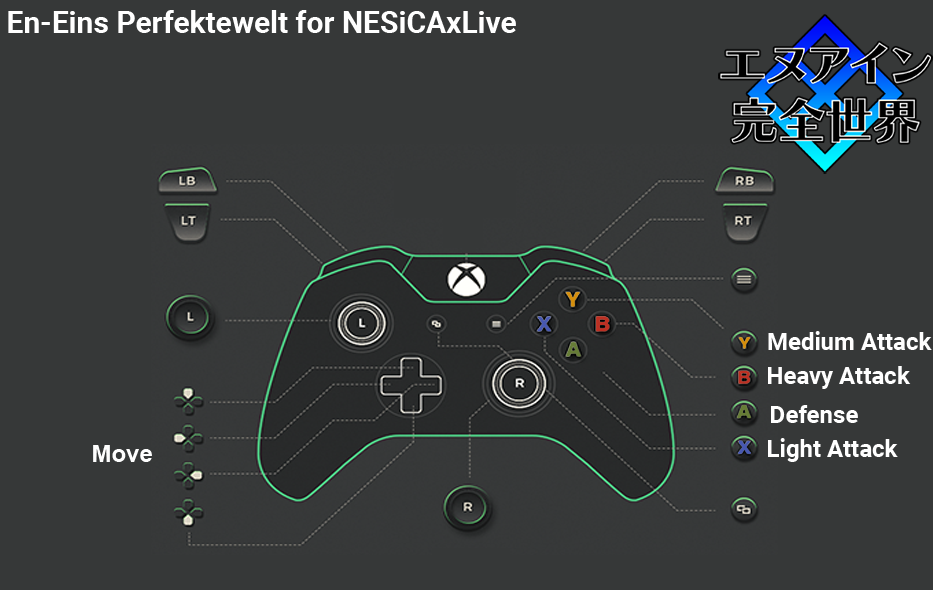
<style>
.page{position:relative;width:933px;height:590px;background:#363838}
.page>*{position:absolute;margin:0}
.t1{font:30px "Roboto-Bold";color:#ffffff}
.t2{font:24px "Roboto-Bold";color:#ffffff}
.t3{font:24px "Arial-BoldMT";color:#fefefe}
</style>
<div class="page">
<p class="t1" style="left:8px;top:10px;width:508px;height:23px">En-Eins Perfektewelt for NESiCAxLive</p>
<p class="t2" style="left:768px;top:331px;width:164px;height:19px">Medium Attack</p>
<p class="t2" style="left:768px;top:366px;width:143px;height:23px">Heavy Attack</p>
<p class="t2" style="left:771px;top:405px;width:87px;height:18px">Defense</p>
<p class="t2" style="left:768px;top:438px;width:130px;height:24px">Light Attack</p>
<p class="t3" style="left:93px;top:445px;width:59px;height:17px">Move</p>
</div>
